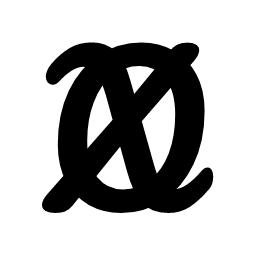
<style>
.page{position:relative;width:256px;height:256px;background:#ffffff}
.page>*{position:absolute;margin:0}
.t1{font:200px "Pacifico-Regular";color:#000000}
</style>
<div class="page">
<p class="t1" style="left:42px;top:42px;width:172px;height:171px">X</p>
<p class="t1" style="left:57px;top:42px;width:148px;height:171px">O</p>
</div>
